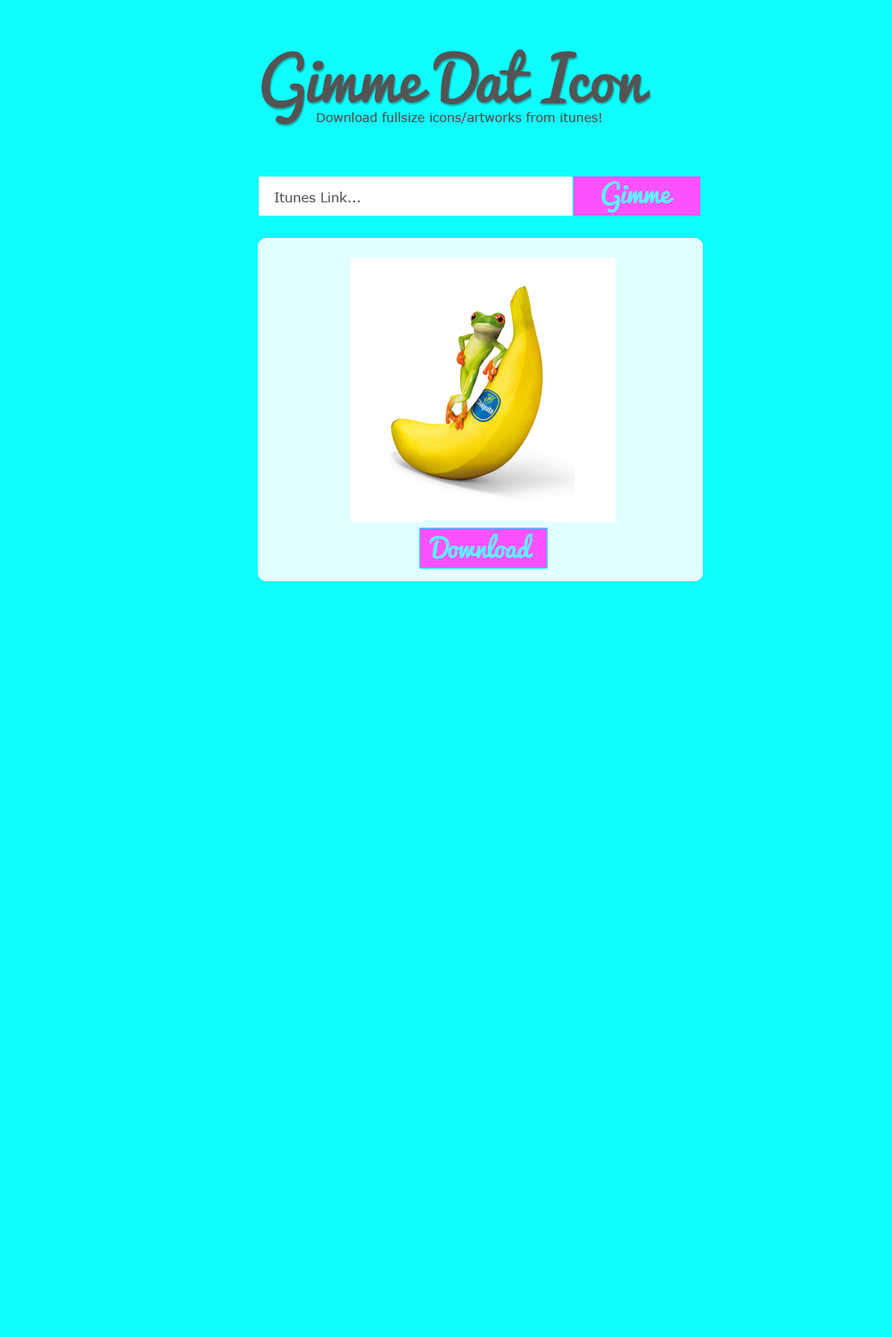
<style>
.page{position:relative;width:892px;height:1337px;background:#0efefe}
.page>*{position:absolute;margin:0}
.t1{font:104px "Pacifico-Regular";color:#545454}
.t2{font:21.4px "Verdana";color:#545454}
.t3{font:44.6px "Pacifico-Regular";color:#54ffff}
.t4{font:22.3px "Verdana";color:#545454}
</style>
<div class="page">
<p class="t1" style="left:261px;top:49px;width:389px;height:76px">Gimme Dat Icon</p>
<p class="t2" style="left:317px;top:112px;width:284px;height:12px">Download fullsize icons/artworks from itunes!</p>
<p class="t3" style="left:601px;top:181px;width:73px;height:32px">Gimme</p>
<p class="t4" style="left:275px;top:192px;width:85px;height:10px">Itunes Link...</p>
<p class="t3" style="left:429px;top:533px;width:104px;height:26px">Download</p>
</div>
